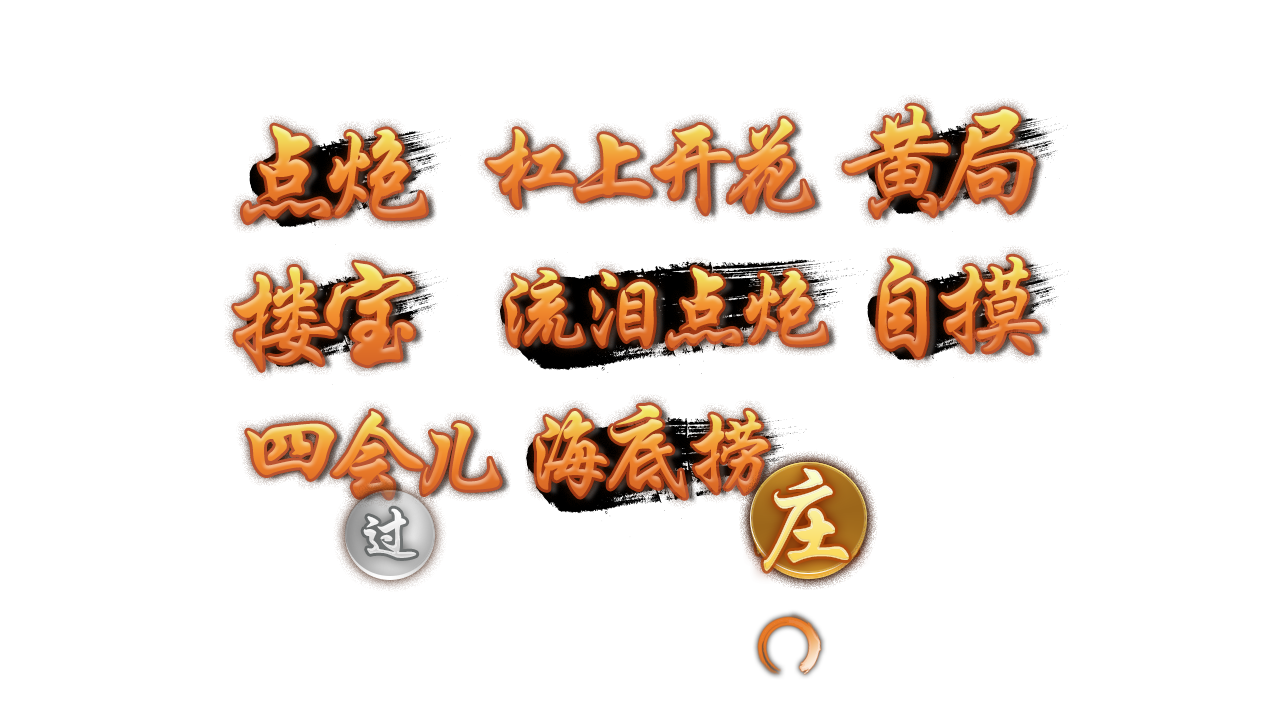
<style>
.page{position:relative;width:1280px;height:720px;background:#ffffff}
.page>*{position:absolute;margin:0}
.t1{font:120px "STXingkai";letter-spacing:-0.26em}
.t2{font:100px "STXingkai";letter-spacing:-0.2em}
.t3{font:120px "STXingkai";letter-spacing:-0.2em}
.t4{font:112px "STXingkai"}
.t5{font:66.1px "STXingkai";color:#e8e8e8}
</style>
<div class="page">
<p class="t1" style="left:844px;top:105px;width:190px;height:112px">黄局</p>
<p class="t1" style="left:243px;top:125px;width:183px;height:98px">点炮</p>
<p class="t2" style="left:487px;top:118px;width:326px;height:96px">杠上开花</p>
<p class="t1" style="left:878px;top:256px;width:162px;height:101px">自摸</p>
<p class="t1" style="left:234px;top:262px;width:180px;height:108px">搂宝</p>
<p class="t2" style="left:505px;top:267px;width:322px;height:81px">流泪点炮</p>
<p class="t2" style="left:247px;top:411px;width:253px;height:87px"><span class="t3">四</span>会儿</p>
<p class="t2" style="left:535px;top:405px;width:234px;height:93px">海底捞</p>
<p class="t4" style="left:763px;top:468px;width:86px;height:103px">庄</p>
<p class="t5" style="left:363px;top:508px;width:54px;height:50px">过</p>
</div>
